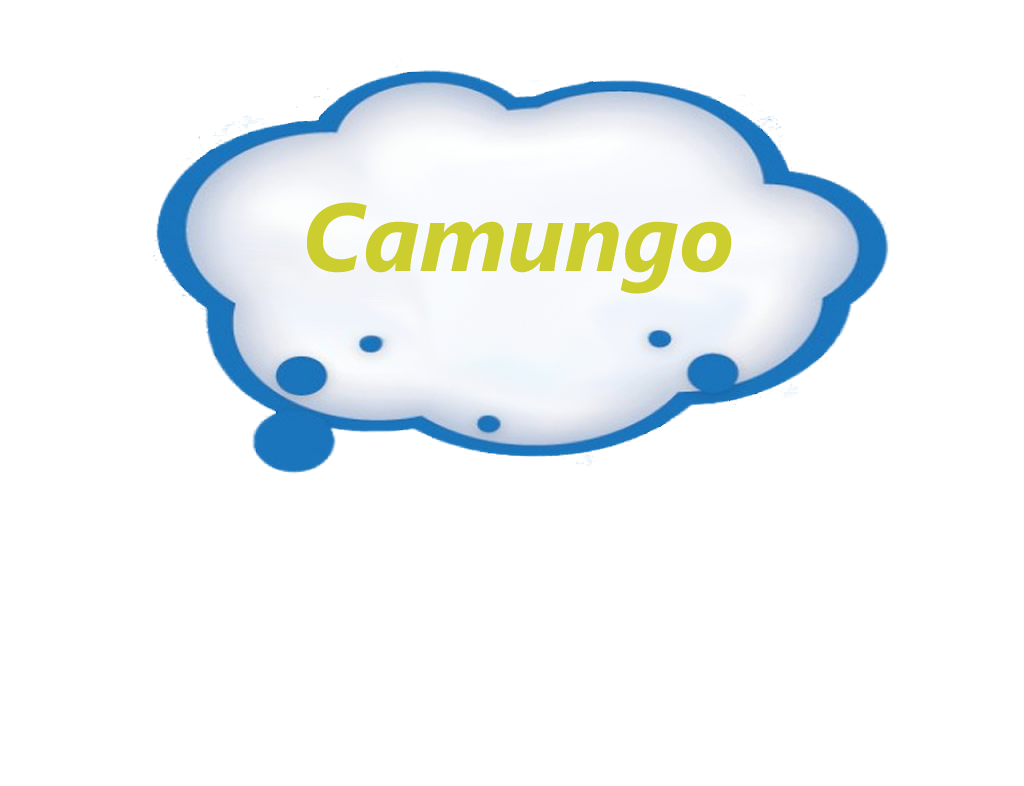
<style>
.page{position:relative;width:1024px;height:786px;background:#ffffff}
.page>*{position:absolute;margin:0}
.t1{font:96px "SegoeUI-BoldItalic";color:#ccce30}
</style>
<div class="page">
<p class="t1" style="left:307px;top:202px;width:425px;height:92px">Camungo</p>
</div>
